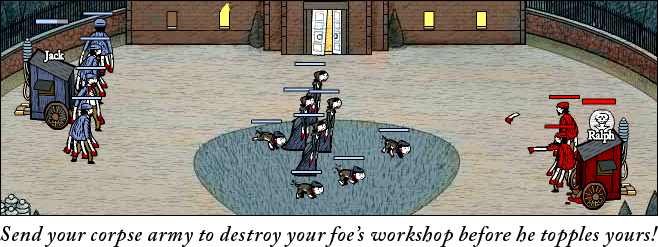
<style>
.page{position:relative;width:658px;height:247px}
.page>*{position:absolute;margin:0}
.t1{font:21.5px "ACaslonPro-SemiboldItalic";letter-spacing:0.025em;color:#000000}
</style>
<div class="page">
<p class="t1" style="left:0px;top:226px;width:658px;height:21px">Send your corpse army to destroy your foe’s workshop before he topples yours!</p>
</div>
